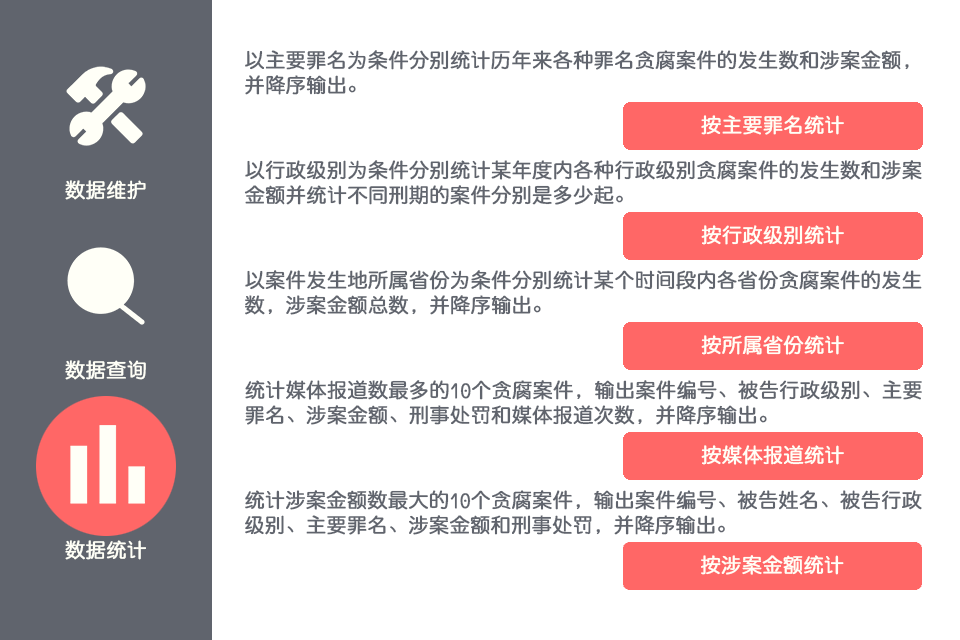
<style>
.page{position:relative;width:960px;height:640px;background:#ffffff}
.page>*{position:absolute;margin:0}
.t1{font:20px/25px "QingYuanMono";color:#60646d;font-weight:bold}
.t2{font:20px "QingYuanMono";color:#fffff7;font-weight:bold}
</style>
<div class="page">
<p class="t1" style="left:245px;top:50px;width:664px;height:45px">以主要罪名为条件分别统计历年来各种罪名贪腐案件的发生数和涉案金额，<br>并降序输出。</p>
<p class="t2" style="left:701px;top:115px;width:143px;height:20px">按主要罪名统计</p>
<p class="t1" style="left:244px;top:160px;width:678px;height:45px">以行政级别为条件分别统计某年度内各种行政级别贪腐案件的发生数和涉案<br>金额并统计不同刑期的案件分别是多少起。</p>
<p class="t2" style="left:65px;top:180px;width:81px;height:20px">数据维护</p>
<p class="t2" style="left:701px;top:225px;width:143px;height:20px">按行政级别统计</p>
<p class="t1" style="left:245px;top:270px;width:677px;height:45px">以案件发生地所属省份为条件分别统计某个时间段内各省份贪腐案件的发生<br>数，涉案金额总数，并降序输出。</p>
<p class="t2" style="left:701px;top:335px;width:143px;height:20px">按所属省份统计</p>
<p class="t2" style="left:65px;top:360px;width:81px;height:20px">数据查询</p>
<p class="t1" style="left:245px;top:380px;width:677px;height:45px">统计媒体报道数最多的10个贪腐案件，输出案件编号、被告行政级别、主要<br>罪名、涉案金额、刑事处罚和媒体报道次数，并降序输出。</p>
<p class="t2" style="left:701px;top:445px;width:143px;height:20px">按媒体报道统计</p>
<p class="t1" style="left:245px;top:490px;width:677px;height:45px">统计涉案金额数最大的10个贪腐案件，输出案件编号、被告姓名、被告行政<br>级别、主要罪名、涉案金额和刑事处罚，并降序输出。</p>
<p class="t2" style="left:65px;top:540px;width:81px;height:20px">数据统计</p>
<p class="t2" style="left:701px;top:555px;width:143px;height:20px">按涉案金额统计</p>
</div>
